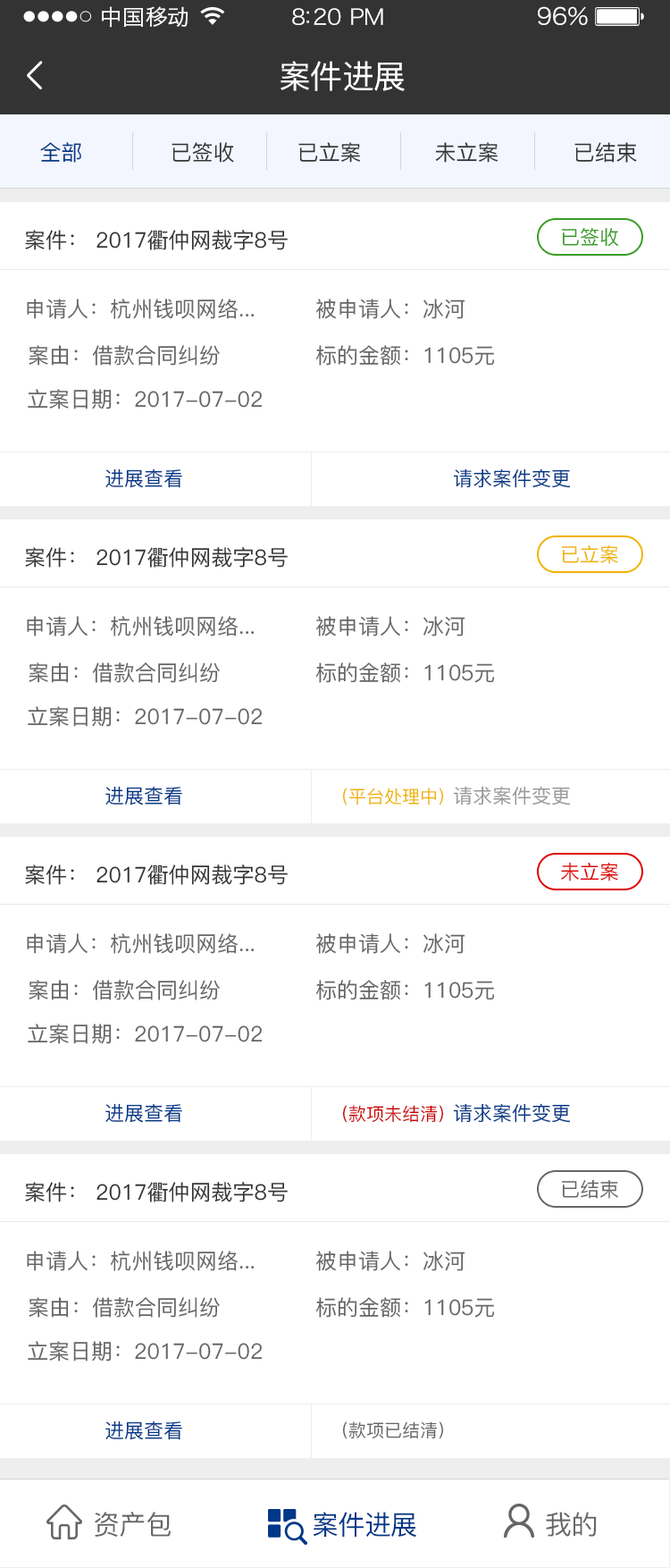
<style>
.page{position:relative;width:670px;height:1568px;background:#ffffff}
.page>*{position:absolute;margin:0}
.t1{font:21.5px "HiraginoSansGB-W3";letter-spacing:0.02em;color:#ffffff;scale:1.03 1}
.t2{font:21.5px "HiraginoSansGB-W3";letter-spacing:-0.02em;color:#ffffff;scale:1.03 1}
.t3{font:23.4px "HiraginoSansGB-W3";letter-spacing:-0.02em;color:#ffffff;scale:1.03 1}
.t4{font:32.2px "PingFang-SC-Medium";letter-spacing:-0.02em;color:#ffffff}
.t5{font:21.5px "PingFang-SC-Medium";color:#003888}
.t6{font:21.5px "PingFang-SC-Medium";color:#333333}
.t7{font:19.7px "PingFang-SC-Medium";color:#379e23}
.t8{font:21.5px "PingFang-SC-Medium";color:#666666}
.t9{font:19.7px "PingFang-SC-Medium";color:#003888}
.t10{font:19.7px "PingFang-SC-Medium";color:#f0b300}
.t11{font:19.7px "PingFang-SC-Medium";color:#999999}
.t12{font:17.9px "PingFang-SC-Medium";color:#f0b300}
.t13{font:19.7px "PingFang-SC-Medium";color:#de0101}
.t14{font:17.9px "PingFang-SC-Medium";color:#cc0000}
.t15{font:19.7px "PingFang-SC-Medium";color:#666666}
.t16{font:17.9px "PingFang-SC-Medium";color:#666666}
.t17{font:26.8px "PingFang-SC-Medium";letter-spacing:-0.02em;color:#666666}
.t18{font:26.8px "PingFang-SC-Medium";letter-spacing:-0.02em;color:#003888}
</style>
<div class="page">
<p class="t1" style="left:102px;top:6px;width:87px;height:22px">中国移动</p>
<p class="t2" style="left:292px;top:8px;width:92px;height:17px">8:20 PM</p>
<p class="t3" style="left:538px;top:6px;width:50px;height:20px">96%</p>
<p class="t4" style="left:281px;top:61px;width:124px;height:30px">案件进展</p>
<p class="t5" style="left:40px;top:142px;width:41px;height:21px">全部</p>
<p class="t6" style="left:172px;top:142px;width:62px;height:21px">已签收</p>
<p class="t6" style="left:299px;top:142px;width:61px;height:21px">已立案</p>
<p class="t6" style="left:435px;top:142px;width:63px;height:21px">未立案</p>
<p class="t6" style="left:575px;top:142px;width:62px;height:21px">已结束</p>
<p class="t6" style="left:25px;top:230px;width:263px;height:20px">案件： 2017衢仲网裁字8号</p>
<p class="t7" style="left:562px;top:228px;width:58px;height:19px">已签收</p>
<p class="t8" style="left:27px;top:299px;width:228px;height:20px">申请人：杭州钱呗网络...</p>
<p class="t8" style="left:316px;top:299px;width:150px;height:20px">被申请人：冰河</p>
<p class="t8" style="left:29px;top:345px;width:191px;height:21px">案由：借款合同纠纷</p>
<p class="t8" style="left:316px;top:345px;width:179px;height:21px">标的金额：1105元</p>
<p class="t8" style="left:28px;top:389px;width:235px;height:20px">立案日期：2017-07-02</p>
<p class="t9" style="left:105px;top:468px;width:77px;height:20px">进展查看</p>
<p class="t9" style="left:453px;top:468px;width:118px;height:20px">请求案件变更</p>
<p class="t10" style="left:562px;top:545px;width:57px;height:19px">已立案</p>
<p class="t6" style="left:25px;top:547px;width:263px;height:21px">案件： 2017衢仲网裁字8号</p>
<p class="t8" style="left:27px;top:616px;width:228px;height:20px">申请人：杭州钱呗网络...</p>
<p class="t8" style="left:316px;top:616px;width:150px;height:20px">被申请人：冰河</p>
<p class="t8" style="left:29px;top:662px;width:191px;height:21px">案由：借款合同纠纷</p>
<p class="t8" style="left:316px;top:662px;width:179px;height:21px">标的金额：1105元</p>
<p class="t8" style="left:28px;top:706px;width:235px;height:21px">立案日期：2017-07-02</p>
<p class="t9" style="left:105px;top:786px;width:77px;height:19px">进展查看</p>
<p class="t11" style="left:453px;top:786px;width:118px;height:19px">请求案件变更</p>
<p class="t12" style="left:342px;top:788px;width:102px;height:17px">（平台处理中）</p>
<p class="t6" style="left:25px;top:864px;width:263px;height:21px">案件： 2017衢仲网裁字8号</p>
<p class="t13" style="left:561px;top:863px;width:58px;height:18px">未立案</p>
<p class="t8" style="left:27px;top:933px;width:228px;height:21px">申请人：杭州钱呗网络...</p>
<p class="t8" style="left:316px;top:933px;width:150px;height:21px">被申请人：冰河</p>
<p class="t8" style="left:29px;top:980px;width:191px;height:20px">案由：借款合同纠纷</p>
<p class="t8" style="left:316px;top:980px;width:179px;height:20px">标的金额：1105元</p>
<p class="t8" style="left:28px;top:1024px;width:235px;height:20px">立案日期：2017-07-02</p>
<p class="t9" style="left:105px;top:1103px;width:77px;height:20px">进展查看</p>
<p class="t14" style="left:342px;top:1105px;width:102px;height:18px">（款项未结清）</p>
<p class="t9" style="left:453px;top:1103px;width:118px;height:20px">请求案件变更</p>
<p class="t6" style="left:25px;top:1182px;width:263px;height:20px">案件： 2017衢仲网裁字8号</p>
<p class="t15" style="left:562px;top:1179px;width:57px;height:20px">已结束</p>
<p class="t8" style="left:27px;top:1251px;width:228px;height:20px">申请人：杭州钱呗网络...</p>
<p class="t8" style="left:316px;top:1251px;width:150px;height:20px">被申请人：冰河</p>
<p class="t8" style="left:29px;top:1297px;width:191px;height:21px">案由：借款合同纠纷</p>
<p class="t8" style="left:316px;top:1297px;width:179px;height:21px">标的金额：1105元</p>
<p class="t8" style="left:28px;top:1341px;width:235px;height:20px">立案日期：2017-07-02</p>
<p class="t9" style="left:105px;top:1420px;width:77px;height:20px">进展查看</p>
<p class="t16" style="left:342px;top:1421px;width:102px;height:18px">（款项已结清）</p>
<p class="t17" style="left:95px;top:1512px;width:76px;height:25px">资产包</p>
<p class="t18" style="left:313px;top:1512px;width:104px;height:26px">案件进展</p>
<p class="t17" style="left:546px;top:1512px;width:51px;height:25px">我的</p>
</div>
